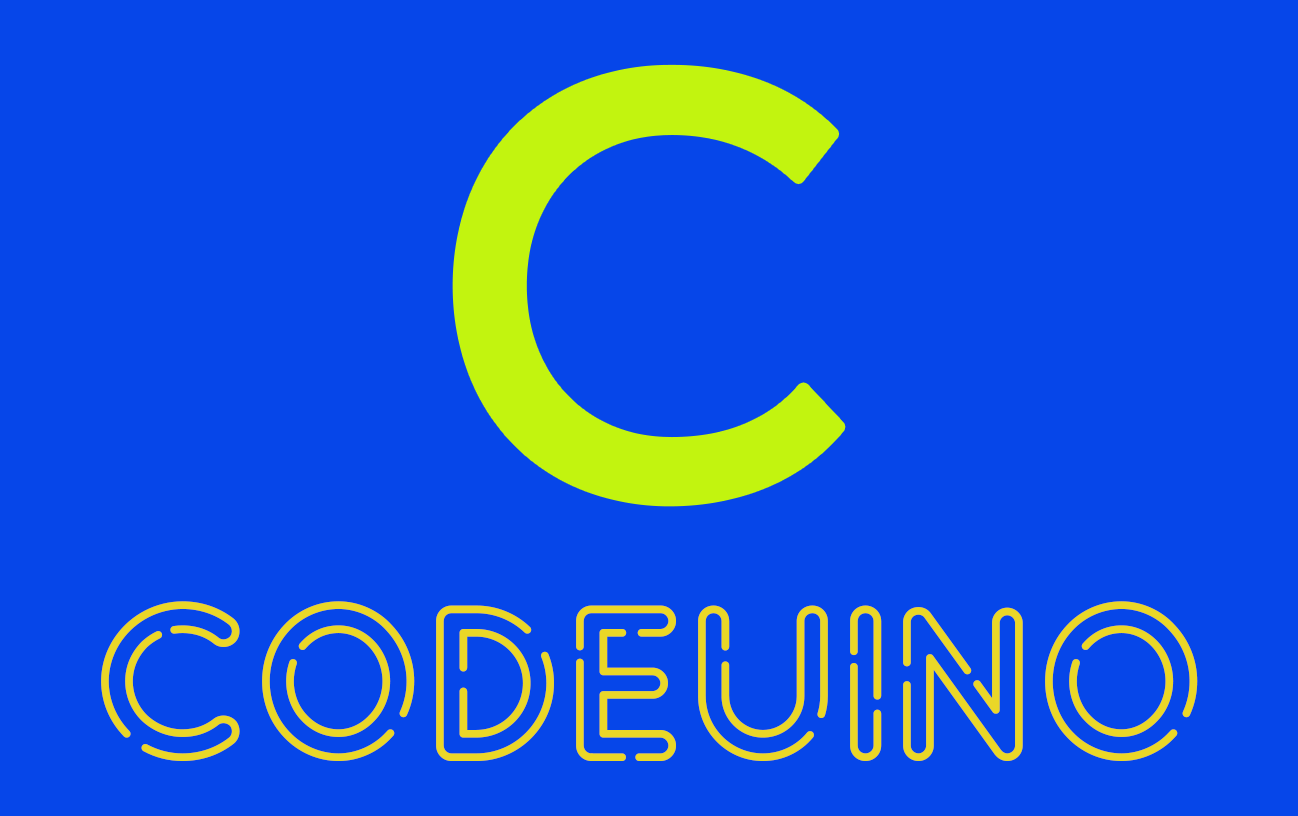
<style>
.page{position:relative;width:1298px;height:816px;background:#0646e9}
.page>*{position:absolute;margin:0}
.t1{font:222.7px "NeonOneRegular";color:#ead727}
</style>
<div class="page">
<p class="t1" style="left:101px;top:601px;width:1097px;height:161px">CODEUINO</p>
</div>
